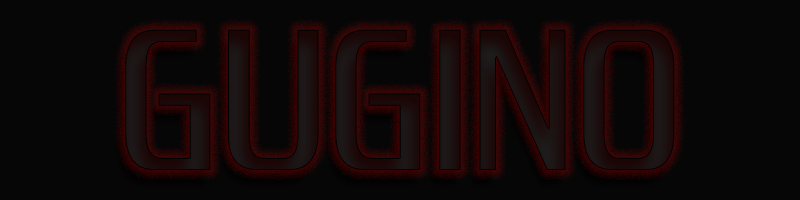
<style>
.page{position:relative;width:800px;height:200px;background:#060606}
.page>*{position:absolute;margin:0}
.t1{font:200px "ZrnicRg-Regular";color:#1d1d1d;text-transform:uppercase}
</style>
<div class="page">
<p class="t1" style="left:125px;top:29px;width:550px;height:141px">Gugino</p>
</div>
